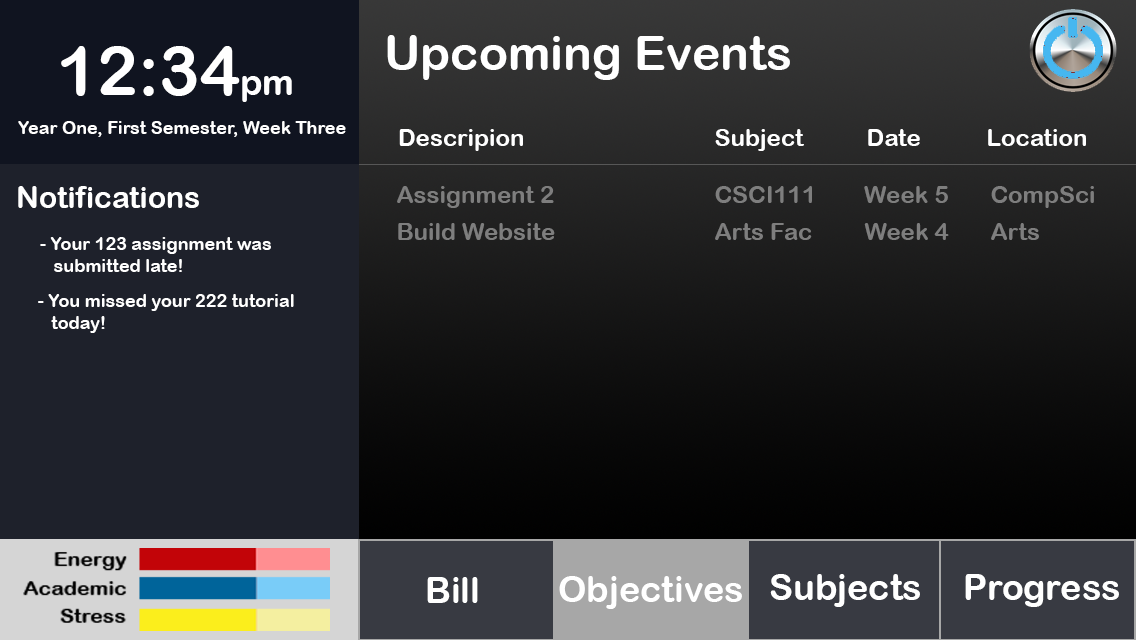
<style>
.page{position:relative;width:1136px;height:640px}
.page>*{position:absolute;margin:0}
.t1{font:48px "ArialRoundedMTBold";color:#ffffff}
.t2{font:68px "ArialRoundedMTBold";color:#ffffff}
.t3{font:36px "ArialRoundedMTBold";color:#ffffff}
.t4{font:18px "ArialRoundedMTBold";color:#ffffff}
.t5{font:24px "ArialRoundedMTBold";color:#ffffff}
.t6{font:30px "ArialRoundedMTBold";color:#ffffff}
.t7{font:24px "ArialRoundedMTBold";color:#7e7e7e}
</style>
<div class="page">
<p class="t1" style="left:387px;top:35px;width:403px;height:45px">Upcoming Events</p>
<p class="t2" style="left:61px;top:46px;width:231px;height:56px">12:34<span class="t3">pm</span></p>
<p class="t4" style="left:18px;top:121px;width:328px;height:16px">Year One, First Semester, Week Three</p>
<p class="t5" style="left:399px;top:129px;width:124px;height:22px">Descripion</p>
<p class="t5" style="left:715px;top:129px;width:89px;height:22px">Subject</p>
<p class="t5" style="left:868px;top:129px;width:52px;height:17px">Date</p>
<p class="t5" style="left:988px;top:129px;width:98px;height:17px">Location</p>
<p class="t6" style="left:18px;top:186px;width:181px;height:22px">Notifications</p>
<p class="t7" style="left:397px;top:186px;width:697px;height:22px">Assignment 2         CSCI111        Week 5    CompSci</p>
<p class="t7" style="left:398px;top:223px;width:641px;height:17px">Build Website         Arts Fac  Week 4    Arts</p>
<p class="t4" style="left:40px;top:237px;width:231px;height:35px">- Your 123 assignment was <br>   submitted late!</p>
<p class="t4" style="left:38px;top:294px;width:256px;height:39px">- You missed your 222 tutorial <br>   today!</p>
<p class="t3" style="left:427px;top:577px;width:51px;height:26px">Bill</p>
<p class="t3" style="left:559px;top:576px;width:183px;height:33px">Objectives</p>
<p class="t3" style="left:770px;top:574px;width:150px;height:33px">Subjects</p>
<p class="t3" style="left:965px;top:574px;width:154px;height:33px">Progress</p>
</div>
